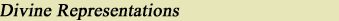
<style>
.page{position:relative;width:339px;height:21px;background:#e6e6b8}
.page>*{position:absolute;margin:0}
.t1{font:18px "TimesNewRomanPSMT";color:#010101;font-weight:bold;font-style:italic}
</style>
<div class="page">
<p class="t1" style="left:0px;top:3px;width:180px;height:17px">Divine Representations</p>
</div>
